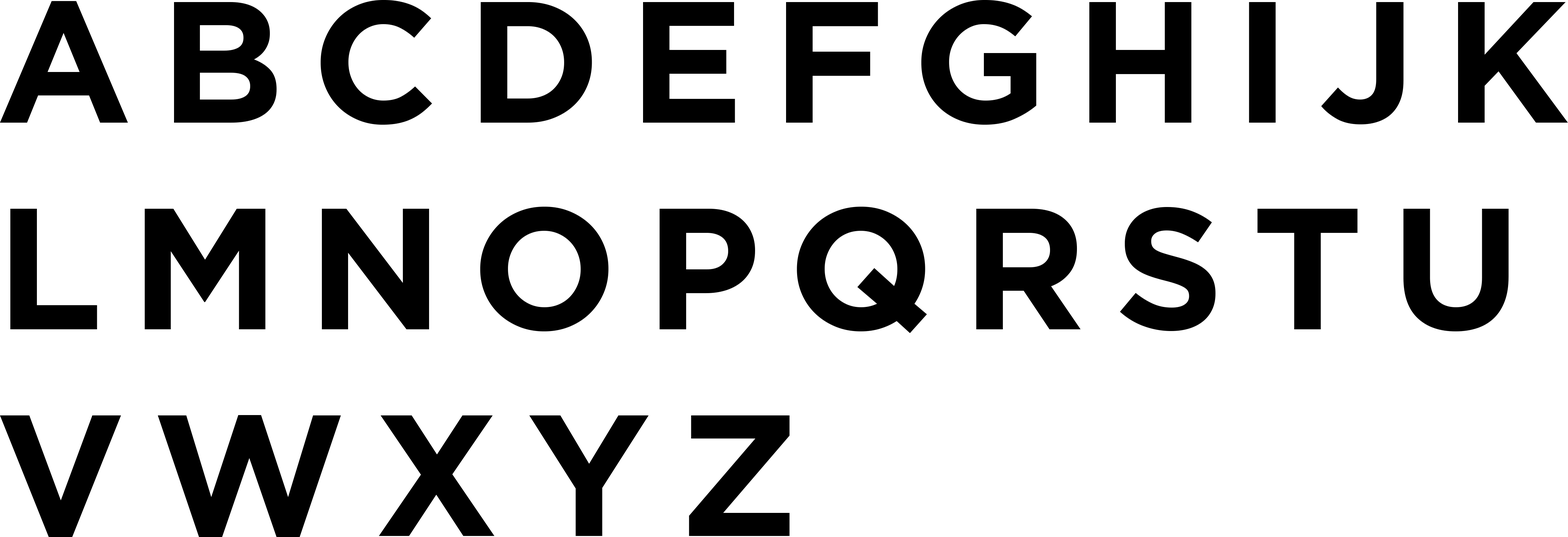
<style>
.page{position:relative;width:1568px;height:537px;background:#ffffff}
.page>*{position:absolute;margin:0}
.t1{font:172.3px "GothamBold";letter-spacing:0.16em;color:#000000}
</style>
<div class="page">
<p class="t1" style="left:0px;top:0px;width:1568px;height:537px">ABCDEFGHIJK<br>LMNOPQRSTU<br>VWXYZ</p>
</div>
